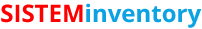
<style>
.page{position:relative;width:202px;height:29px;background:#ffffff}
.page>*{position:absolute;margin:0}
.t1{font:24px "OpenSans-Bold";color:#0da3e2}
.t2{font:24px "OpenSans-Bold";color:#ff0000}
</style>
<div class="page">
<p class="t1" style="left:1px;top:3px;width:201px;height:25px"><span class="t2">SISTEM</span>inventory</p>
</div>
